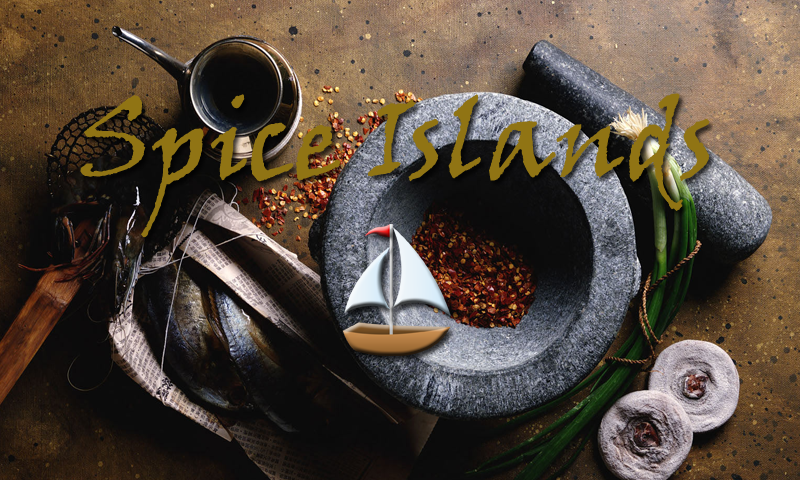
<style>
.page{position:relative;width:800px;height:480px}
.page>*{position:absolute;margin:0}
.t1{font:108px "VinerHandITC";color:#907414}
</style>
<div class="page">
<p class="t1" style="left:80px;top:93px;width:630px;height:145px">Spice Islands</p>
</div>
